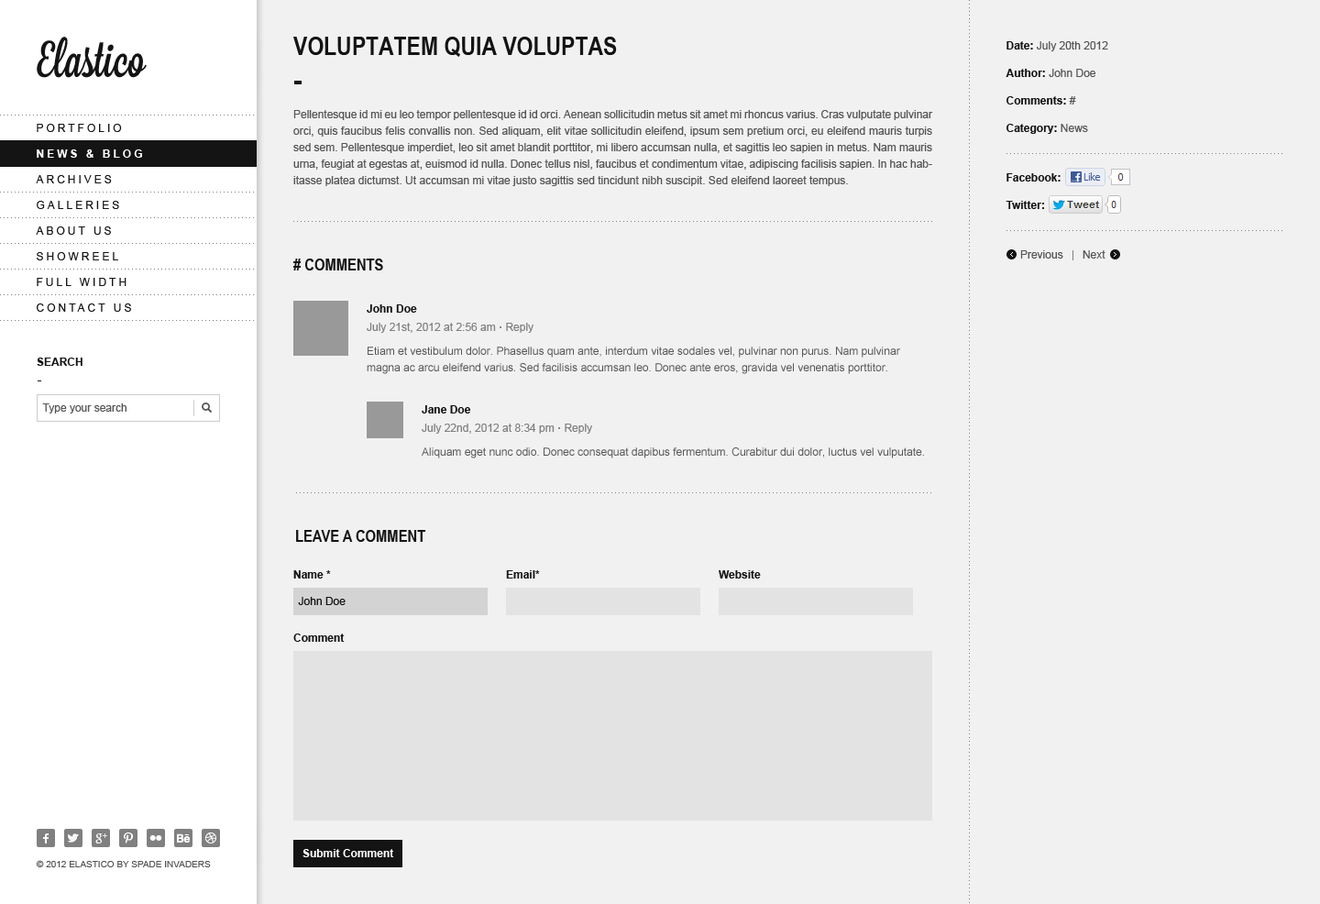
<style>
.page{position:relative;width:1320px;height:904px;background:#f1f1f1}
.page>*{position:absolute;margin:0}
.t1{font:25.7px "ArialNarrow-Bold";color:#141414;text-transform:uppercase}
.t2{font:11px/27.5px "ArialMT";color:#555555}
.t3{font:11px/27.5px "Arial-BoldMT";color:#141414}
.t4{font:11px/16.5px "ArialMT";color:#555555}
.t5{font:11px "ArialMT";letter-spacing:0.25em;color:#141414;text-transform:uppercase}
.t6{font:11px "Arial-BoldMT";letter-spacing:0.25em;color:#ffffff;text-transform:uppercase}
.t7{font:11px "ArialMT";color:#555555}
.t8{font:16.5px "ArialNarrow-Bold";color:#141414;text-transform:uppercase}
.t9{font:11px "Arial-BoldMT";color:#141414}
.t10{font:11px "ArialMT";color:#808080}
.t11{font:11px "Arial-BoldMT";color:#808080}
.t12{font:11px "Arial-BoldMT";color:#141414;text-transform:uppercase}
.t13{font:11px "ArialMT";color:#141414}
.t14{font:11px "Arial-BoldMT";color:#ffffff}
.t15{font:9.2px "ArialMT";color:#555555;text-transform:uppercase}
</style>
<div class="page">
<p class="t1" style="left:293px;top:37px;width:324px;height:20px">voluptatem quia voluptas</p>
<p class="t2" style="left:1005px;top:41px;width:103px;height:93px"><span class="t3">Date: </span>July 20th 2012<br><span class="t3">Author: </span>John Doe<br><span class="t3">Comments: </span>#<br><span class="t3">Category: </span>News</p>
<p class="t4" style="left:293px;top:110px;width:640px;height:76px;text-align:justify">Pellentesque id mi eu leo tempor pellentesque id id orci. Aenean sollicitudin metus sit amet mi rhoncus varius. Cras vulputate pulvinar orci, quis faucibus felis convallis non. Sed aliquam, elit vitae sollicitudin eleifend, ipsum sem pretium orci, eu eleifend mauris turpis sed sem. Pellentesque imperdiet, leo sit amet blandit porttitor, mi libero accumsan nulla, et sagittis leo sapien in metus. Nam mauris urna, feugiat at egestas at, euismod id nulla. Donec tellus nisl, faucibus et condimentum vitae, adipiscing facilisis sapien. In hac habitasse platea dictumst. Ut accumsan mi vitae justo sagittis sed tincidunt nibh suscipit. Sed eleifend laoreet tempus.</p>
<p class="t5" style="left:37px;top:124px;width:85px;height:8px">portfolio</p>
<p class="t6" style="left:37px;top:149px;width:105px;height:9px">news &amp; blog</p>
<p class="t3" style="left:1005px;top:173px;width:55px;height:36px">Facebook:<br>Twitter:</p>
<p class="t5" style="left:36px;top:175px;width:76px;height:8px">archives</p>
<p class="t5" style="left:37px;top:201px;width:82px;height:8px">galleries</p>
<p class="t5" style="left:36px;top:226px;width:75px;height:9px">about us</p>
<p class="t5" style="left:37px;top:252px;width:81px;height:8px">showreel</p>
<p class="t7" style="left:1020px;top:250px;width:43px;height:8px">Previous</p>
<p class="t7" style="left:1082px;top:250px;width:23px;height:8px">Next</p>
<p class="t8" style="left:293px;top:258px;width:90px;height:12px"># comments</p>
<p class="t5" style="left:37px;top:278px;width:89px;height:8px">full width</p>
<p class="t5" style="left:37px;top:303px;width:94px;height:9px">contact us</p>
<p class="t9" style="left:367px;top:304px;width:50px;height:9px">John Doe</p>
<p class="t10" style="left:367px;top:323px;width:166px;height:10px">July 21st, 2012 at 2:56 am <span class="t11">· </span>Reply</p>
<p class="t4" style="left:367px;top:346px;width:533px;height:28px">Etiam et vestibulum dolor. Phasellus quam ante, interdum vitae sodales vel, pulvinar non purus. Nam pulvinar magna ac arcu eleifend varius. Sed facilisis accumsan leo. Donec ante eros, gravida vel venenatis porttitor.</p>
<p class="t12" style="left:37px;top:357px;width:45px;height:9px">search</p>
<p class="t7" style="left:42px;top:403px;width:84px;height:10px">Type your search</p>
<p class="t9" style="left:422px;top:405px;width:49px;height:8px">Jane Doe</p>
<p class="t10" style="left:422px;top:423px;width:170px;height:10px">July 22nd, 2012 at 8:34 pm <span class="t11">· </span>Reply</p>
<p class="t7" style="left:422px;top:447px;width:502px;height:11px">Aliquam eget nunc odio. Donec consequat dapibus fermentum. Curabitur dui dolor, luctus vel vulputate.</p>
<p class="t8" style="left:296px;top:530px;width:130px;height:12px">leave a comment</p>
<p class="t9" style="left:293px;top:570px;width:38px;height:8px">Name *</p>
<p class="t9" style="left:506px;top:570px;width:34px;height:8px">Email*</p>
<p class="t9" style="left:718px;top:570px;width:43px;height:8px">Website</p>
<p class="t13" style="left:298px;top:597px;width:47px;height:8px">John Doe</p>
<p class="t9" style="left:293px;top:633px;width:52px;height:8px">Comment</p>
<p class="t14" style="left:302px;top:849px;width:92px;height:8px">Submit Comment</p>
<p class="t15" style="left:36px;top:860px;width:175px;height:8px">© 2012 elastico by spade invaders</p>
</div>
